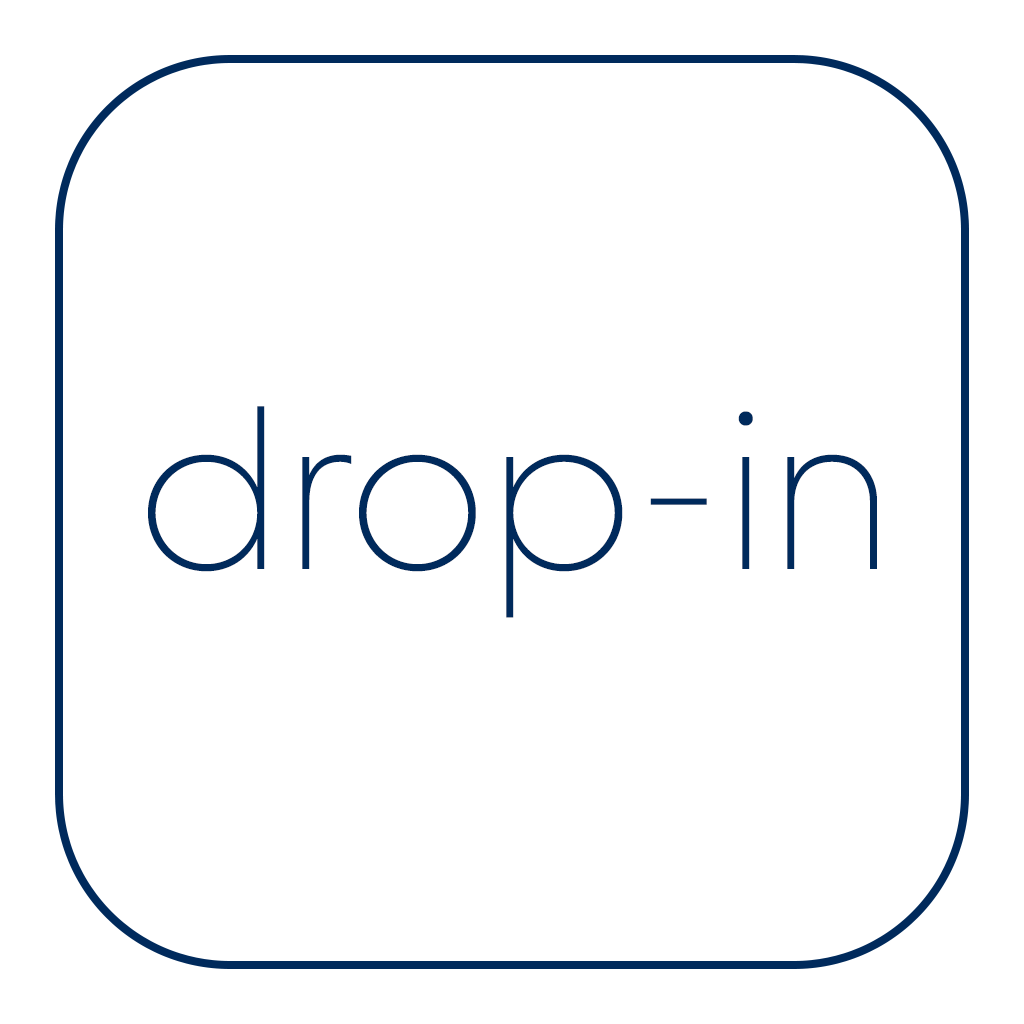
<style>
.page{position:relative;width:1024px;height:1024px;background:#ffffff}
.page>*{position:absolute;margin:0}
.t1{font:236px "NiveauGroteskExtraLight";color:#002a5c}
</style>
<div class="page">
<p class="t1" style="left:148px;top:406px;width:729px;height:212px">drop-in</p>
</div>
